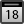
<style>
.page{position:relative;width:24px;height:24px;background:#414141}
.page>*{position:absolute;margin:0}
.t1{font:13.3px "MyriadPro-Regular";color:#000000}
</style>
<div class="page">
<p class="t1" style="left:6px;top:10px;width:13px;height:9px">18</p>
</div>
